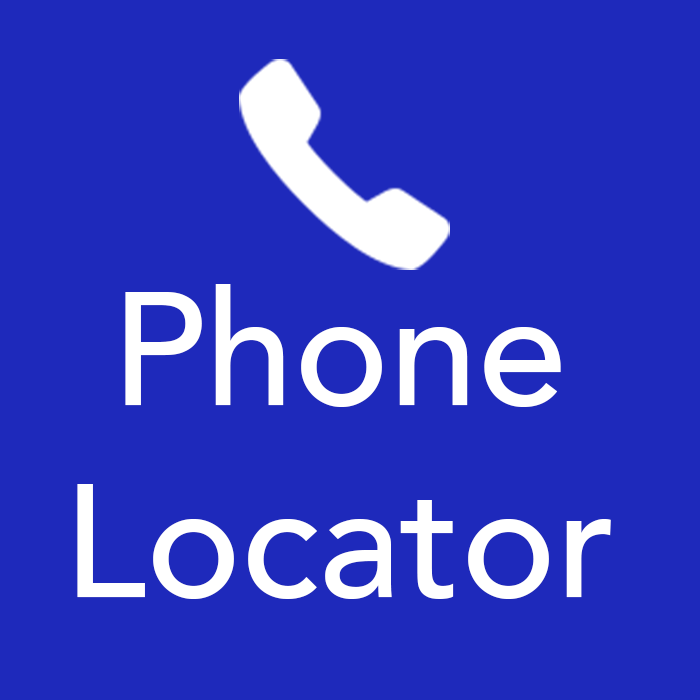
<style>
.page{position:relative;width:700px;height:700px;background:#1e29bb}
.page>*{position:absolute;margin:0}
.t1{font:160px "Avenir-Medium";color:#ffffff}
</style>
<div class="page">
<p class="t1" style="left:77px;top:284px;width:534px;height:315px;text-align:center">Phone<br>Locator</p>
</div>
